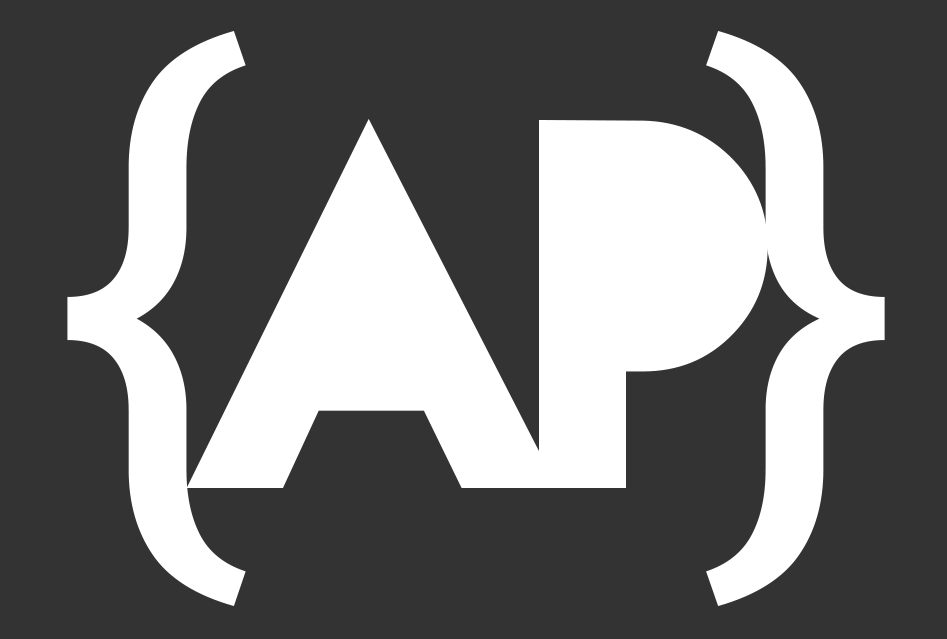
<style>
.page{position:relative;width:947px;height:639px;background:#333333}
.page>*{position:absolute;margin:0}
.t1{font:600px "Roboto-Regular";color:#ffffff}
.t2{font:650px "NovaSOLID-SOLID";color:#ffffff}
</style>
<div class="page">
<p class="t1" style="left:67px;top:30px;width:179px;height:576px">{</p>
<p class="t1" style="left:706px;top:30px;width:179px;height:576px">}</p>
<p class="t2" style="left:186px;top:119px;width:582px;height:369px">AP</p>
</div>
